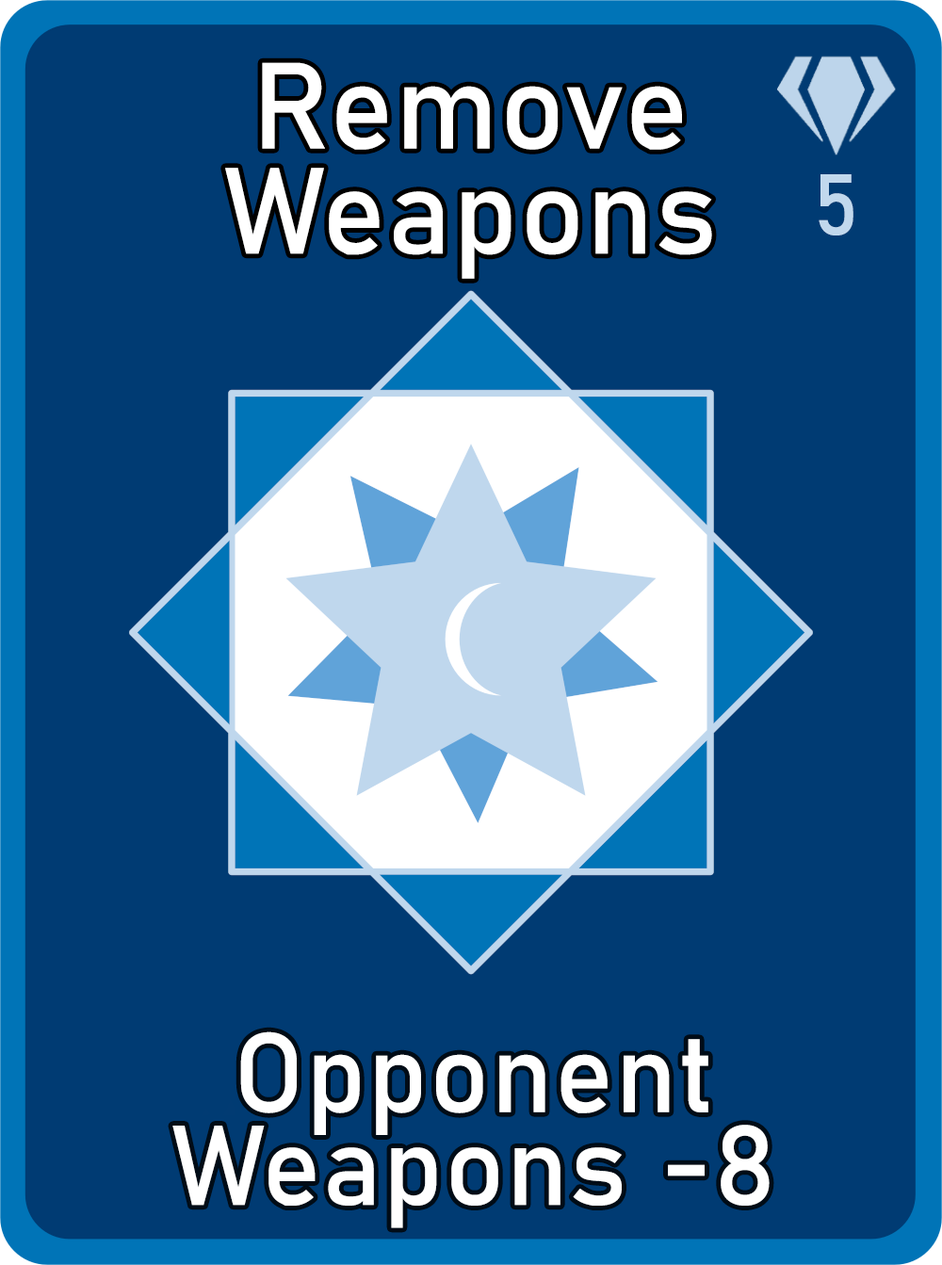
<style>
.page{position:relative;width:942px;height:1265px;background:#003b73}
.page>*{position:absolute;margin:0}
.t1{font:120.6px/105.1px "Bahnschrift";letter-spacing:0.01em;color:#ffffff}
.t2{font:85px "Bahnschrift";letter-spacing:0.01em;color:#c1d8ed}
.t3{font:111.3px/92.7px "Bahnschrift";letter-spacing:0.01em;color:#ffffff}
</style>
<div class="page">
<p class="t1" style="left:225px;top:62px;width:487px;height:217px;text-align:center">Remove<br>Weapons</p>
<p class="t2" style="left:819px;top:174px;width:35px;height:62px">5</p>
<p class="t3" style="left:172px;top:1032px;width:598px;height:197px;text-align:center">Opponent<br>Weapons -8</p>
</div>
